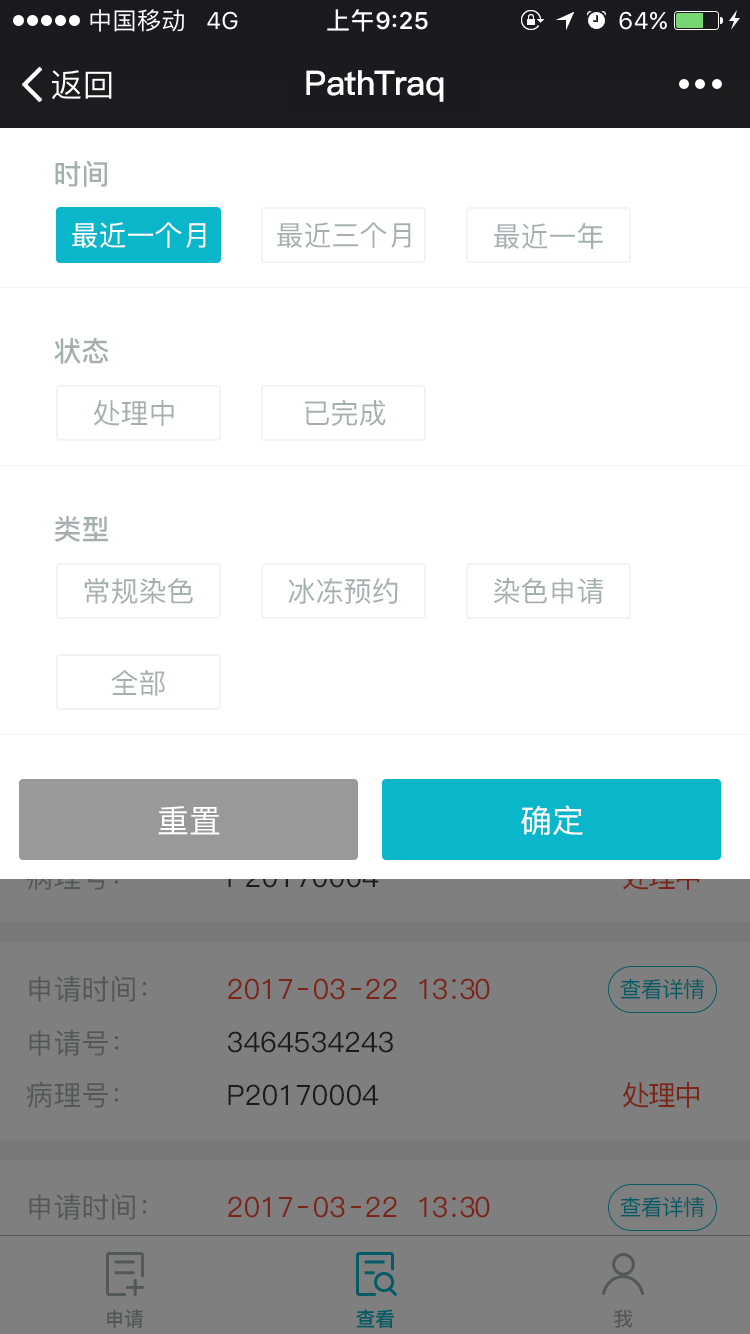
<style>
.page{position:relative;width:750px;height:1334px;background:#ffffff}
.page>*{position:absolute;margin:0}
.t1{font:34px "PingFang-SC-Bold";letter-spacing:-0.025em;color:#ffffff}
.t2{font:28px "PingFang-SC-Bold";color:#a5afb0}
.t3{font:28px "PingFang-SC-Medium";color:#ffffff}
.t4{font:28px "PingFang-SC-Medium";color:#a5afb0}
.t5{font:32px "PingFang-SC-Medium";color:#ffffff}
.t6{font:28px "PingFang-SC-Medium";color:#525758}
.t7{font:28px "PingFang-SC-Medium";color:#7b2418}
.t8{font:28px "PingFang-SC-Medium";letter-spacing:-0.06em;color:#7b2418}
.t9{font:22px "PingFang-SC-Medium";letter-spacing:-0.04em;color:#055b65}
.t10{font:28px "PingFang-SC-Medium";color:#1b1b1b}
.t11{font:20px "PingFang-SC-Bold";letter-spacing:-0.025em;color:#525758}
.t12{font:20px "PingFang-SC-Bold";letter-spacing:-0.025em;color:#055b65}
</style>
<div class="page">
<p class="t1" style="left:306px;top:70px;width:138px;height:32px">PathTraq</p>
<p class="t2" style="left:55px;top:160px;width:52px;height:27px">时间</p>
<p class="t3" style="left:72px;top:222px;width:134px;height:26px">最近一个月</p>
<p class="t4" style="left:277px;top:222px;width:134px;height:26px">最近三个月</p>
<p class="t4" style="left:494px;top:223px;width:109px;height:26px">最近一年</p>
<p class="t2" style="left:54px;top:337px;width:55px;height:27px">状态</p>
<p class="t4" style="left:94px;top:400px;width:80px;height:26px">处理中</p>
<p class="t4" style="left:305px;top:400px;width:81px;height:26px">已完成</p>
<p class="t2" style="left:55px;top:516px;width:53px;height:26px">类型</p>
<p class="t4" style="left:84px;top:578px;width:109px;height:26px">常规染色</p>
<p class="t4" style="left:288px;top:578px;width:110px;height:26px">冰冻预约</p>
<p class="t4" style="left:494px;top:578px;width:110px;height:26px">染色申请</p>
<p class="t4" style="left:111px;top:670px;width:54px;height:26px">全部</p>
<p class="t5" style="left:158px;top:806px;width:62px;height:29px">重置</p>
<p class="t5" style="left:521px;top:805px;width:62px;height:30px">确定</p>
<p class="t6" style="left:29px;top:976px;width:118px;height:26px">申请时间：</p>
<p class="t7" style="left:228px;top:978px;width:169px;height:22px">2017  03  22</p>
<p class="t8" style="left:419px;top:978px;width:71px;height:22px">13∶30</p>
<p class="t9" style="left:620px;top:978px;width:85px;height:22px">查看详情</p>
<p class="t6" style="left:29px;top:1030px;width:90px;height:26px">申请号：</p>
<p class="t10" style="left:228px;top:1031px;width:165px;height:22px">3464534243</p>
<p class="t6" style="left:26px;top:1081px;width:93px;height:27px">病理号：</p>
<p class="t10" style="left:228px;top:1084px;width:151px;height:22px">P20170004</p>
<p class="t8" style="left:623px;top:1082px;width:76px;height:26px">处理中</p>
<p class="t6" style="left:29px;top:1194px;width:118px;height:26px">申请时间：</p>
<p class="t7" style="left:228px;top:1196px;width:169px;height:22px">2017  03  22</p>
<p class="t8" style="left:419px;top:1196px;width:71px;height:22px">13∶30</p>
<p class="t9" style="left:620px;top:1196px;width:85px;height:22px">查看详情</p>
<p class="t11" style="left:107px;top:1309px;width:37px;height:19px">申请</p>
<p class="t12" style="left:356px;top:1309px;width:38px;height:19px">查看</p>
<p class="t11" style="left:614px;top:1309px;width:19px;height:19px">我</p>
</div>
